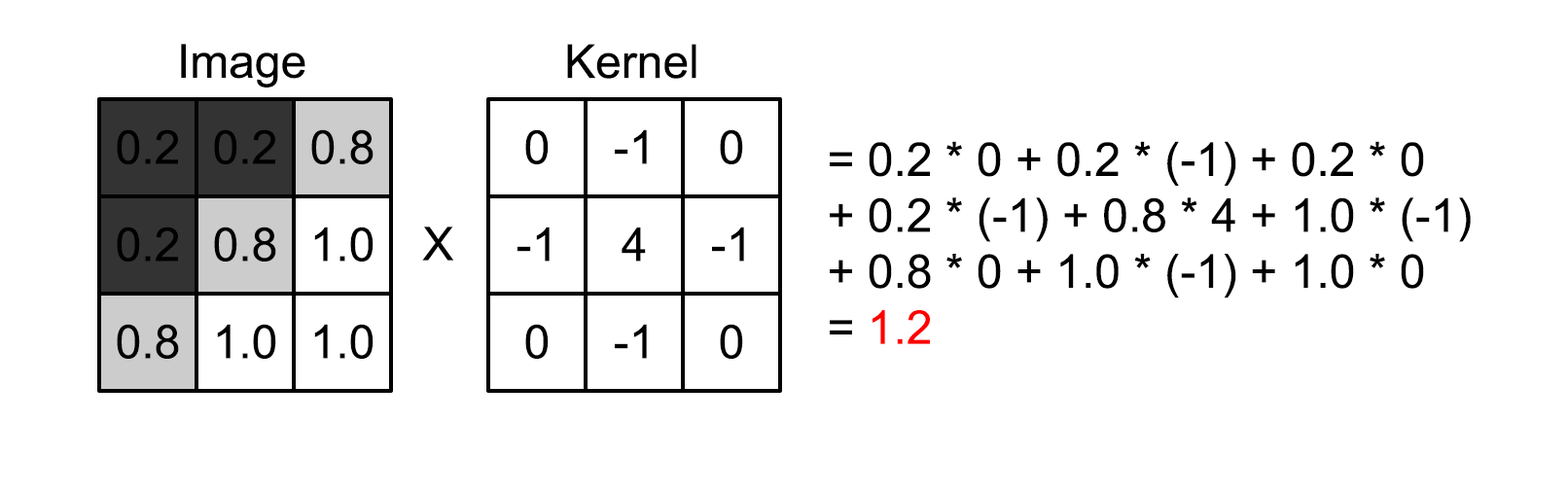
<style>
.page{position:relative;width:1568px;height:491px;background:#ffffff}
.page>*{position:absolute;margin:0}
.t1{font:46.7px "ArialMT";color:#000000}
.t2{font:46.7px "ArialMT";color:#ff0000}
</style>
<div class="page">
<p class="t1" style="left:181px;top:44px;width:124px;height:44px">Image</p>
<p class="t1" style="left:567px;top:44px;width:129px;height:35px">Kernel</p>
<p class="t1" style="left:117px;top:129px;width:61px;height:35px">0.2</p>
<p class="t1" style="left:214px;top:129px;width:61px;height:35px">0.2</p>
<p class="t1" style="left:311px;top:129px;width:63px;height:35px">0.8</p>
<p class="t1" style="left:525px;top:129px;width:24px;height:35px">0</p>
<p class="t1" style="left:615px;top:129px;width:32px;height:35px">-1</p>
<p class="t1" style="left:720px;top:129px;width:23px;height:35px">0</p>
<p class="t1" style="left:830px;top:141px;width:641px;height:203px">= 0.2 * 0 + 0.2 * (-1) + 0.2 * 0<br>+ 0.2 * (-1) + 0.8 * 4 + 1.0 * (-1)<br>+ 0.8 * 0 + 1.0 * (-1) + 1.0 * 0<br>= <span class="t2">1.2</span></p>
<p class="t1" style="left:117px;top:227px;width:61px;height:35px">0.2</p>
<p class="t1" style="left:214px;top:227px;width:62px;height:35px">0.8</p>
<p class="t1" style="left:314px;top:227px;width:60px;height:35px">1.0</p>
<p class="t1" style="left:422px;top:227px;width:32px;height:34px">X</p>
<p class="t1" style="left:517px;top:227px;width:33px;height:35px">-1</p>
<p class="t1" style="left:622px;top:228px;width:24px;height:34px">4</p>
<p class="t1" style="left:712px;top:227px;width:32px;height:35px">-1</p>
<p class="t1" style="left:117px;top:324px;width:62px;height:35px">0.8</p>
<p class="t1" style="left:217px;top:324px;width:59px;height:35px">1.0</p>
<p class="t1" style="left:314px;top:324px;width:60px;height:35px">1.0</p>
<p class="t1" style="left:525px;top:324px;width:24px;height:35px">0</p>
<p class="t1" style="left:615px;top:324px;width:32px;height:35px">-1</p>
<p class="t1" style="left:720px;top:324px;width:23px;height:35px">0</p>
</div>
